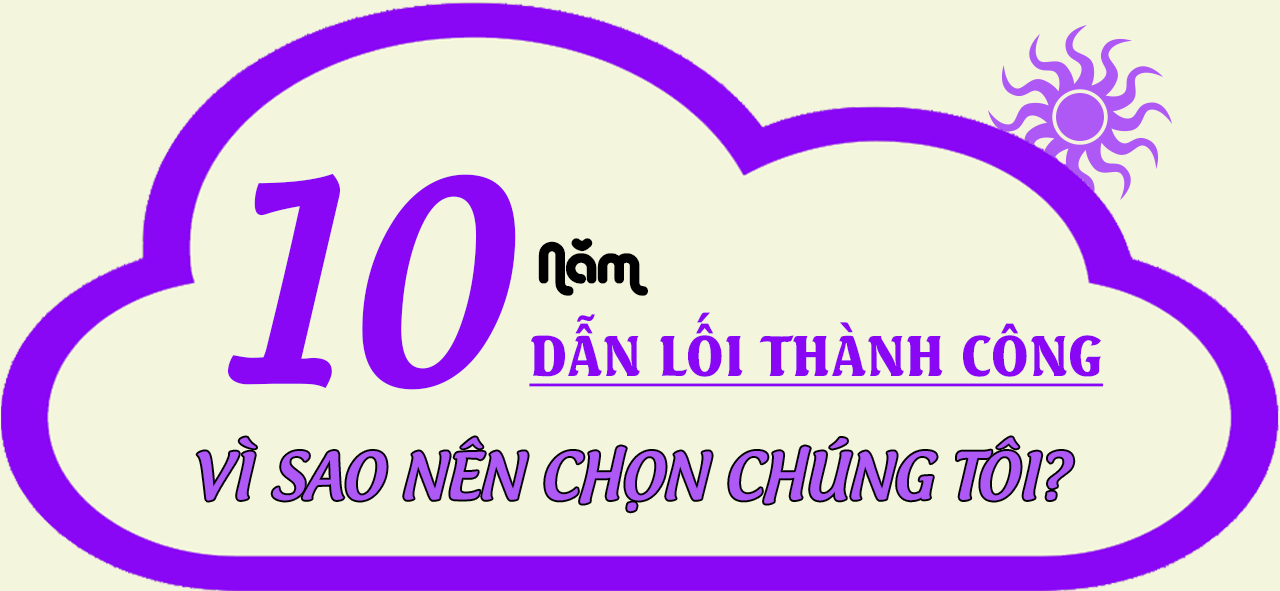
<style>
.page{position:relative;width:1280px;height:591px;background:#f3f5dc}
.page>*{position:absolute;margin:0}
.t1{font:265px "UTM-Androgyne";color:#8a07f5}
.t2{font:55.5px "UTM-Alba-Matter";color:#000000}
.t3{font:55.5px "UTMSeagullBold";color:#8a07f5;text-decoration:underline}
.t4{font:61.1px "UTM-Androgyne";color:#ae58f5}
</style>
<div class="page">
<p class="t1" style="left:227px;top:173px;width:289px;height:217px">10</p>
<p class="t2" style="left:538px;top:238px;width:110px;height:58px">Năm</p>
<p class="t3" style="left:529px;top:312px;width:575px;height:75px">DẪN LỐI THÀNH CÔNG</p>
<p class="t4" style="left:197px;top:437px;width:877px;height:75px">VÌ SAO NÊN CHỌN CHÚNG TÔI?</p>
</div>
